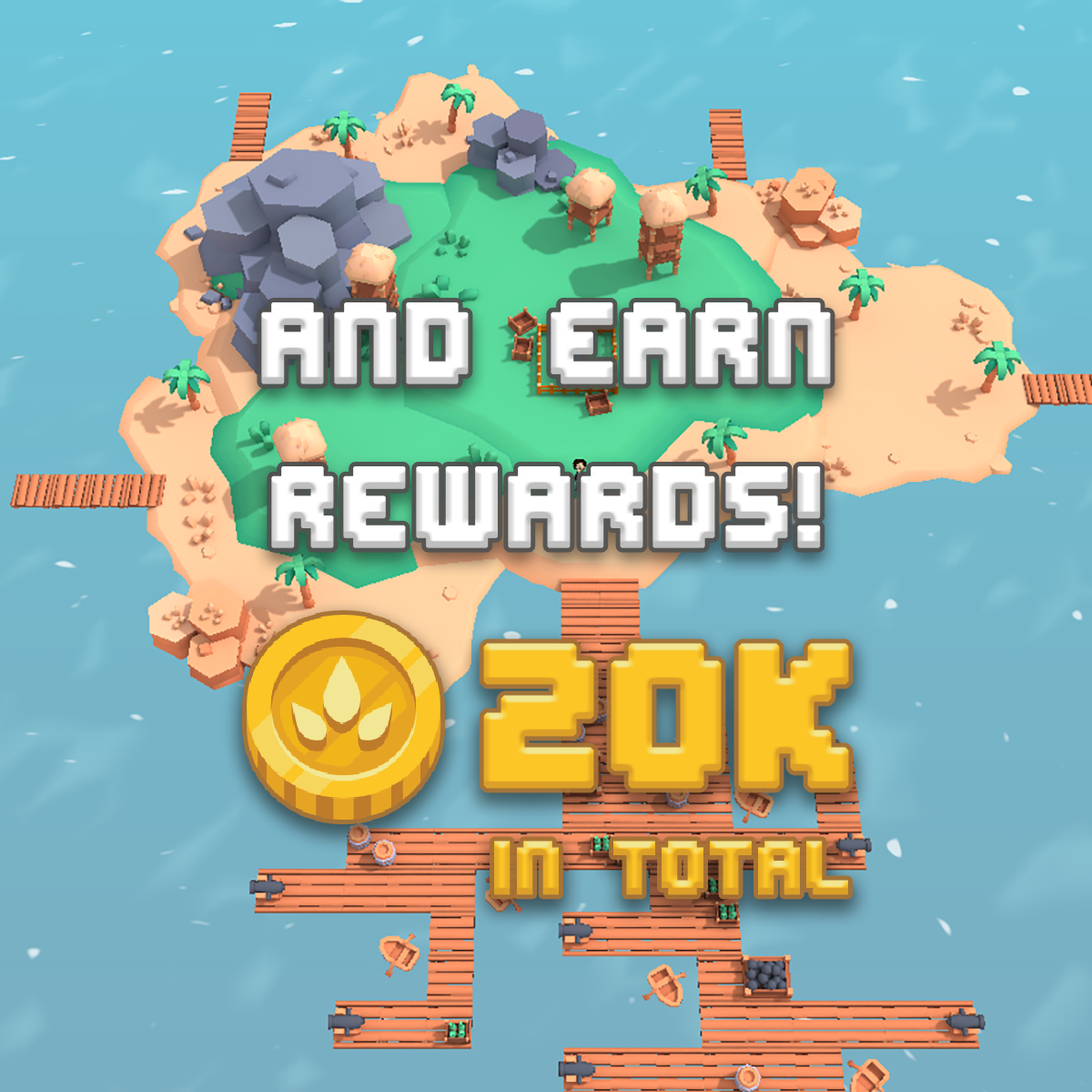
<style>
.page{position:relative;width:1092px;height:1092px}
.page>*{position:absolute;margin:0}
.t1{font:136.6px "EditUndoBRK";color:#ffffff;font-weight:bold}
.t2{font:240.3px "EditUndoBRK";color:#fbc626;font-weight:bold}
.t3{font:91px "EditUndoBRK";font-weight:bold}
</style>
<div class="page">
<p class="t1" style="left:261px;top:302px;width:570px;height:246px;text-align:center">and earn<br>rewards!</p>
<p class="t2" style="left:483px;top:643px;width:366px;height:145px">20k</p>
<p class="t3" style="left:494px;top:840px;width:354px;height:55px">in total</p>
</div>
